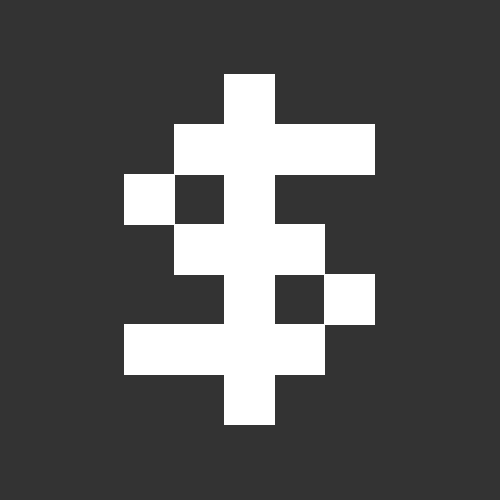
<style>
.page{position:relative;width:500px;height:500px;background:#333333}
.page>*{position:absolute;margin:0}
.t1{font:800px "PixelromHD";letter-spacing:0.025em;color:#ffffff}
</style>
<div class="page">
<p class="t1" style="left:124px;top:74px;width:251px;height:351px">$</p>
</div>
